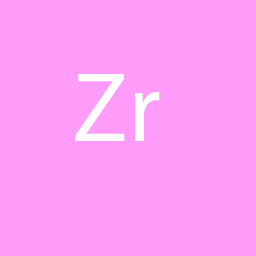
<style>
.page{position:relative;width:256px;height:256px;background:#ff9bf9}
.page>*{position:absolute;margin:0}
.t1{font:100px "MyriadPro-Regular";color:#ffffff}
</style>
<div class="page">
<p class="t1" style="left:75px;top:74px;width:85px;height:67px">Zr</p>
</div>
